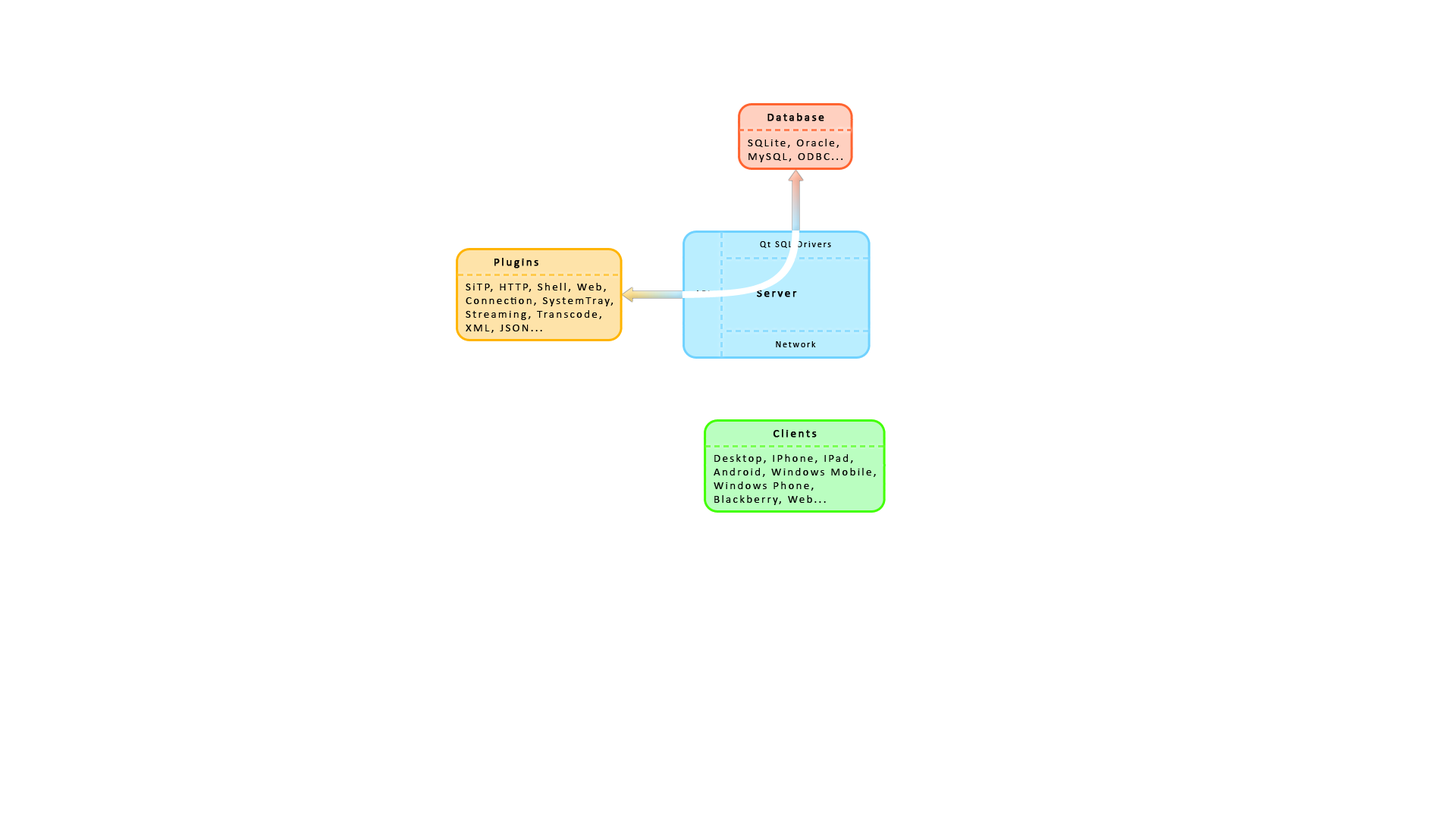
<style>
.page{position:relative;width:1456px;height:819px;background:#ffffff}
.page>*{position:absolute;margin:0}
.t1{font:11.4px "Calibri";letter-spacing:0.15em;color:#000000;font-weight:bold}
.t2{font:11.4px "Calibri";letter-spacing:0.15em;color:#000000}
.t3{font:9.1px "Calibri";letter-spacing:0.15em;color:#000000}
</style>
<div class="page">
<p class="t1" style="left:767px;top:113px;width:57px;height:8px">Database</p>
<p class="t2" style="left:748px;top:139px;width:94px;height:23px">SQLite, Oracle, MySQL, ODBC...</p>
<p class="t3" style="left:760px;top:241px;width:71px;height:7px">Qt SQL Drivers</p>
<p class="t1" style="left:494px;top:258px;width:44px;height:10px">Plugins</p>
<p class="t2" style="left:466px;top:283px;width:147px;height:50px">SiTP, HTTP, Shell, Web, Connection, SystemTray, Streaming, Transcode, XML, JSON...</p>
<p class="t1" style="left:757px;top:290px;width:40px;height:7px">Server</p>
<p class="t3" style="left:776px;top:341px;width:40px;height:6px">Network</p>
<p class="t1" style="left:773px;top:429px;width:44px;height:9px">Clients</p>
<p class="t2" style="left:714px;top:454px;width:162px;height:51px">Desktop, IPhone, IPad,<br>Android, Windows Mobile,<br>Windows Phone,<br>Blackberry, Web...</p>
</div>
